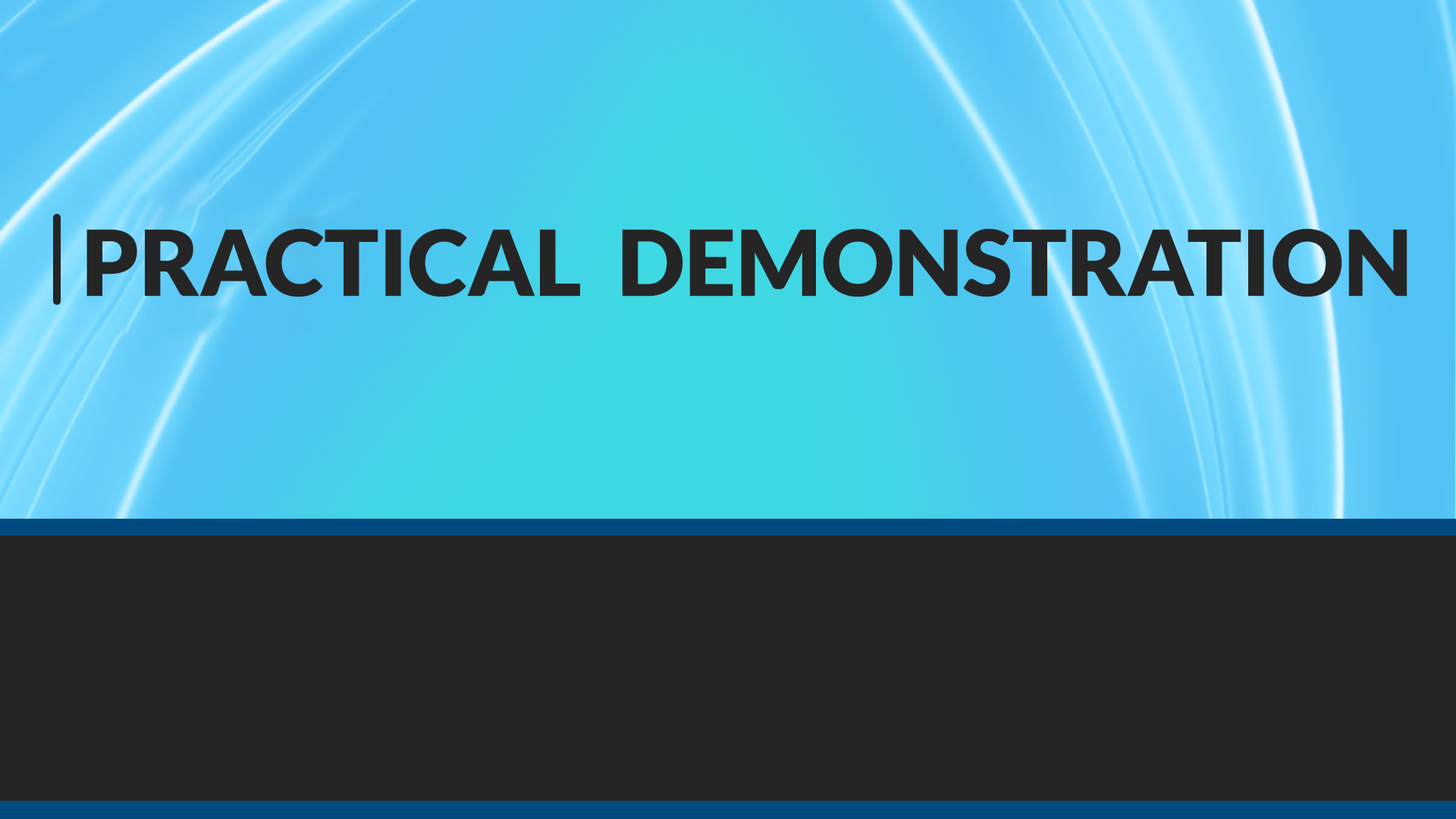
<style>
.page{position:relative;width:1456px;height:819px;background:#252525}
.page>*{position:absolute;margin:0}
.t1{font:91px "Lato-Black";color:#252525}
</style>
<div class="page">
<p class="t1" style="left:86px;top:228px;width:1321px;height:69px">PRACTICAL  DEMONSTRATION</p>
</div>
